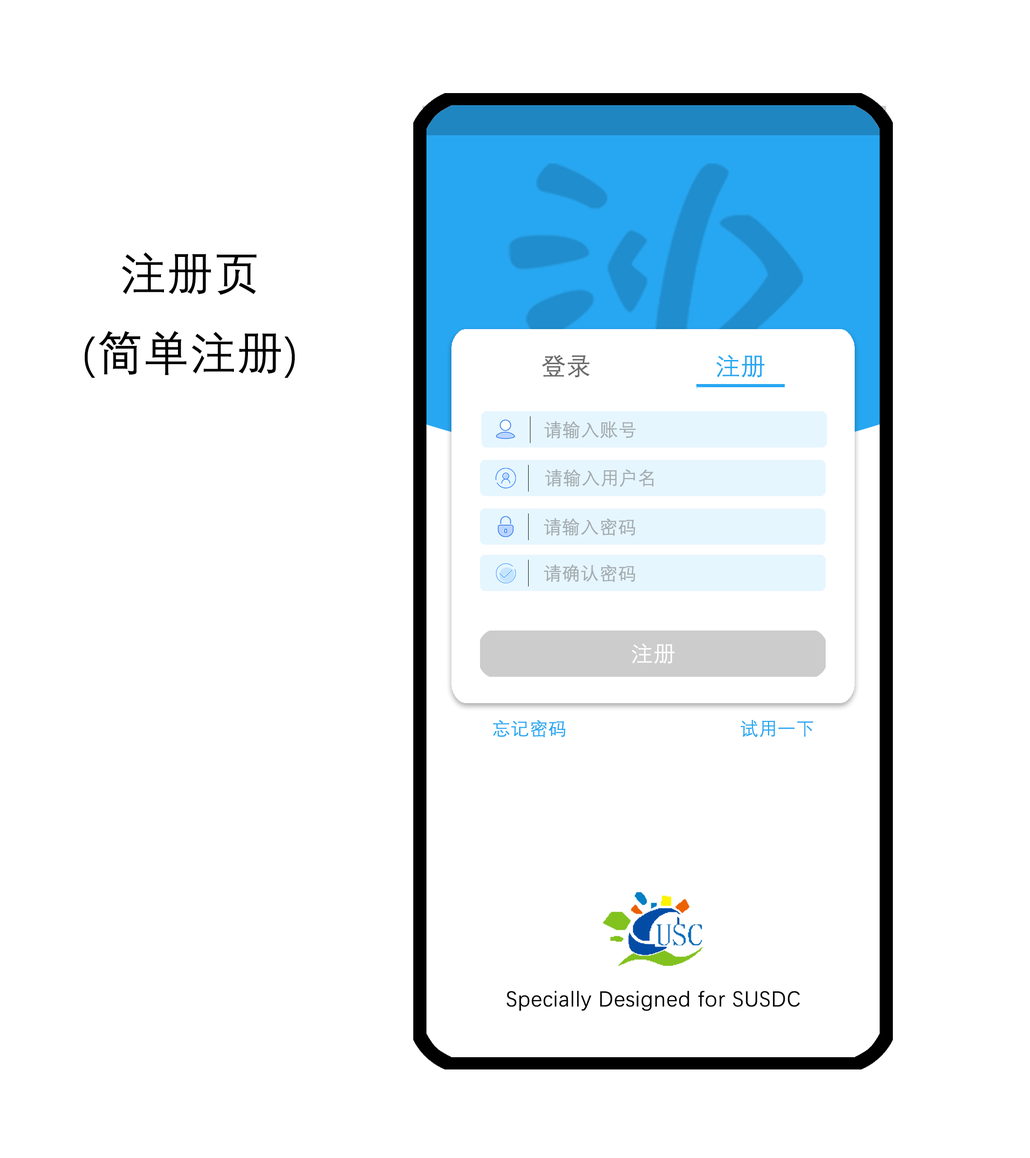
<style>
.page{position:relative;width:1030px;height:1158px;background:#ffffff}
.page>*{position:absolute;margin:0}
.t1{font:45.4px "DengXian";color:#000000;font-weight:bold}
.t2{font:24.5px "DengXian";color:#6b6b6b;font-weight:bold}
.t3{font:24.5px "DengXian";color:#27a7f2;font-weight:bold}
.t4{font:18.2px "DengXian";color:#a3abaf;font-weight:bold}
.t5{font:21.8px "DengXian";color:#ffffff;font-weight:bold}
.t6{font:18.2px "DengXian";color:#27a7f2;font-weight:bold}
.t7{font:21.8px "DengXian";color:#000000;font-weight:bold}
</style>
<div class="page">
<p class="t1" style="left:84px;top:252px;width:211px;height:126px;text-align:center">注册页<br>(简单注册)</p>
<p class="t2" style="left:542px;top:355px;width:48px;height:23px">登录</p>
<p class="t3" style="left:716px;top:355px;width:49px;height:23px">注册</p>
<p class="t4" style="left:544px;top:421px;width:92px;height:18px">请输入账号</p>
<p class="t4" style="left:545px;top:469px;width:108px;height:18px">请输入用户名</p>
<p class="t4" style="left:544px;top:518px;width:91px;height:18px">请输入密码</p>
<p class="t4" style="left:544px;top:564px;width:91px;height:18px">请确认密码</p>
<p class="t5" style="left:631px;top:643px;width:44px;height:21px">注册</p>
<p class="t6" style="left:493px;top:720px;width:72px;height:17px">忘记密码</p>
<p class="t6" style="left:740px;top:720px;width:73px;height:17px">试用一下</p>
<p class="t7" style="left:506px;top:991px;width:293px;height:20px">Specially Designed for SUSDC</p>
</div>
